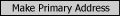
<style>
.page{position:relative;width:120px;height:16px;background:#cdcdcd}
.page>*{position:absolute;margin:0}
.t1{font:10px "Tahoma";color:#000000}
</style>
<div class="page">
<p class="t1" style="left:12px;top:4px;width:98px;height:10px">Make Primary Address</p>
</div>
